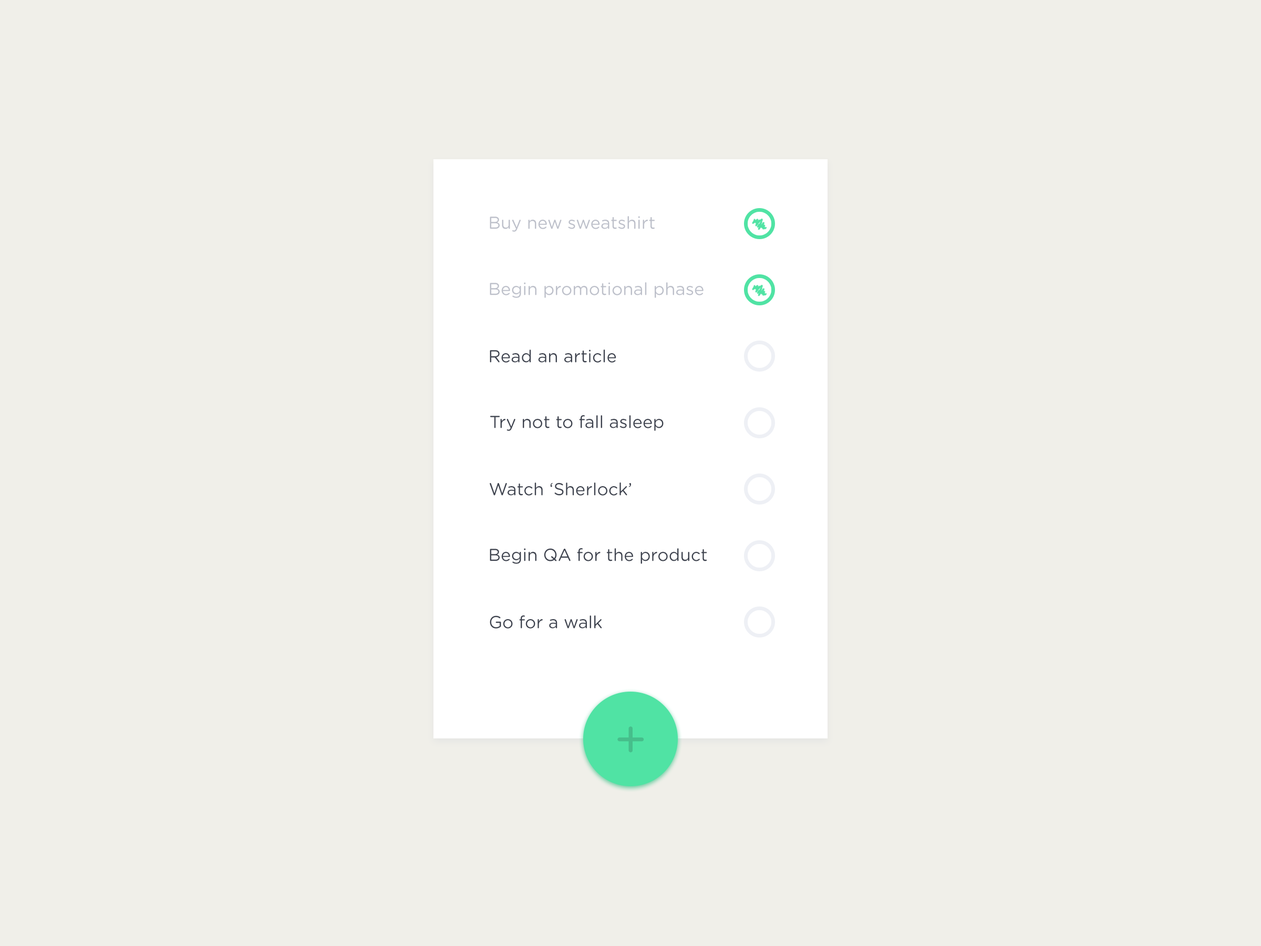
<style>
.page{position:relative;width:1261px;height:946px;background:#f0efe9}
.page>*{position:absolute;margin:0}
.t1{font:17.3px "GothamRounded-Book";color:#bdc0ca}
.t2{font:17.3px "GothamRounded-Book";color:#3e434f}
.t3{font:52.5px "GothamRounded-Book";letter-spacing:0.04em;color:#46be8b;text-transform:uppercase}
</style>
<div class="page">
<p class="t1" style="left:490px;top:216px;width:165px;height:16px">Buy new sweatshirt</p>
<p class="t1" style="left:490px;top:282px;width:213px;height:16px">Begin promotional phase</p>
<p class="t2" style="left:490px;top:349px;width:126px;height:14px">Read an article</p>
<p class="t2" style="left:490px;top:415px;width:174px;height:16px">Try not to fall asleep</p>
<p class="t2" style="left:490px;top:482px;width:141px;height:13px">Watch ‘Sherlock’</p>
<p class="t2" style="left:490px;top:548px;width:217px;height:16px">Begin QA for the product</p>
<p class="t2" style="left:490px;top:615px;width:112px;height:13px">Go for a walk</p>
<p class="t3" style="left:617px;top:726px;width:27px;height:26px">+</p>
</div>
